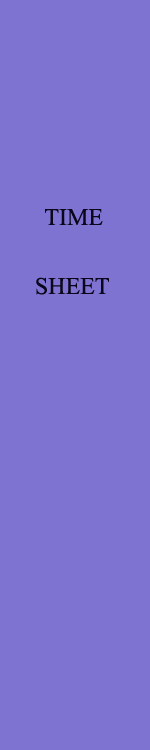
<style>
.page{position:relative;width:150px;height:750px;background:#7e73d1}
.page>*{position:absolute;margin:0}
.t1{font:24px "TimesNewRomanPSMT";color:#0a071c}
</style>
<div class="page">
<p class="t1" style="left:45px;top:209px;width:58px;height:16px">TIME</p>
<p class="t1" style="left:36px;top:277px;width:73px;height:18px">SHEET</p>
</div>
